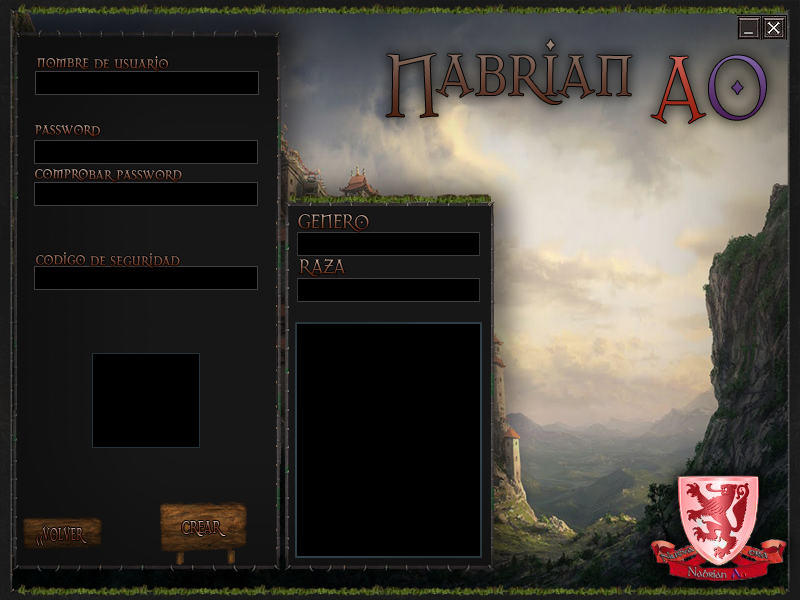
<style>
.page{position:relative;width:800px;height:600px}
.page>*{position:absolute;margin:0}
.t1{font:21.6px "Dark11";scale:0.86 1}
.t2{font:30.2px "Dark11";scale:0.62 1}
.t3{font:30.2px "Dark11";scale:0.51 1}
</style>
<div class="page">
<p class="t1" style="left:37px;top:56px;width:132px;height:15px">nombre de usuario</p>
<p class="t1" style="left:35px;top:124px;width:66px;height:13px">password</p>
<p class="t1" style="left:35px;top:169px;width:147px;height:13px">comprobar password</p>
<p class="t1" style="left:298px;top:214px;width:71px;height:18px">GENERO</p>
<p class="t1" style="left:36px;top:252px;width:144px;height:16px">codigo de seguridad</p>
<p class="t1" style="left:299px;top:258px;width:47px;height:19px">RAZA</p>
<p class="t2" style="left:182px;top:521px;width:44px;height:15px">crear</p>
<p class="t3" style="left:36px;top:527px;width:51px;height:18px">&lt;&lt;volver</p>
</div>
